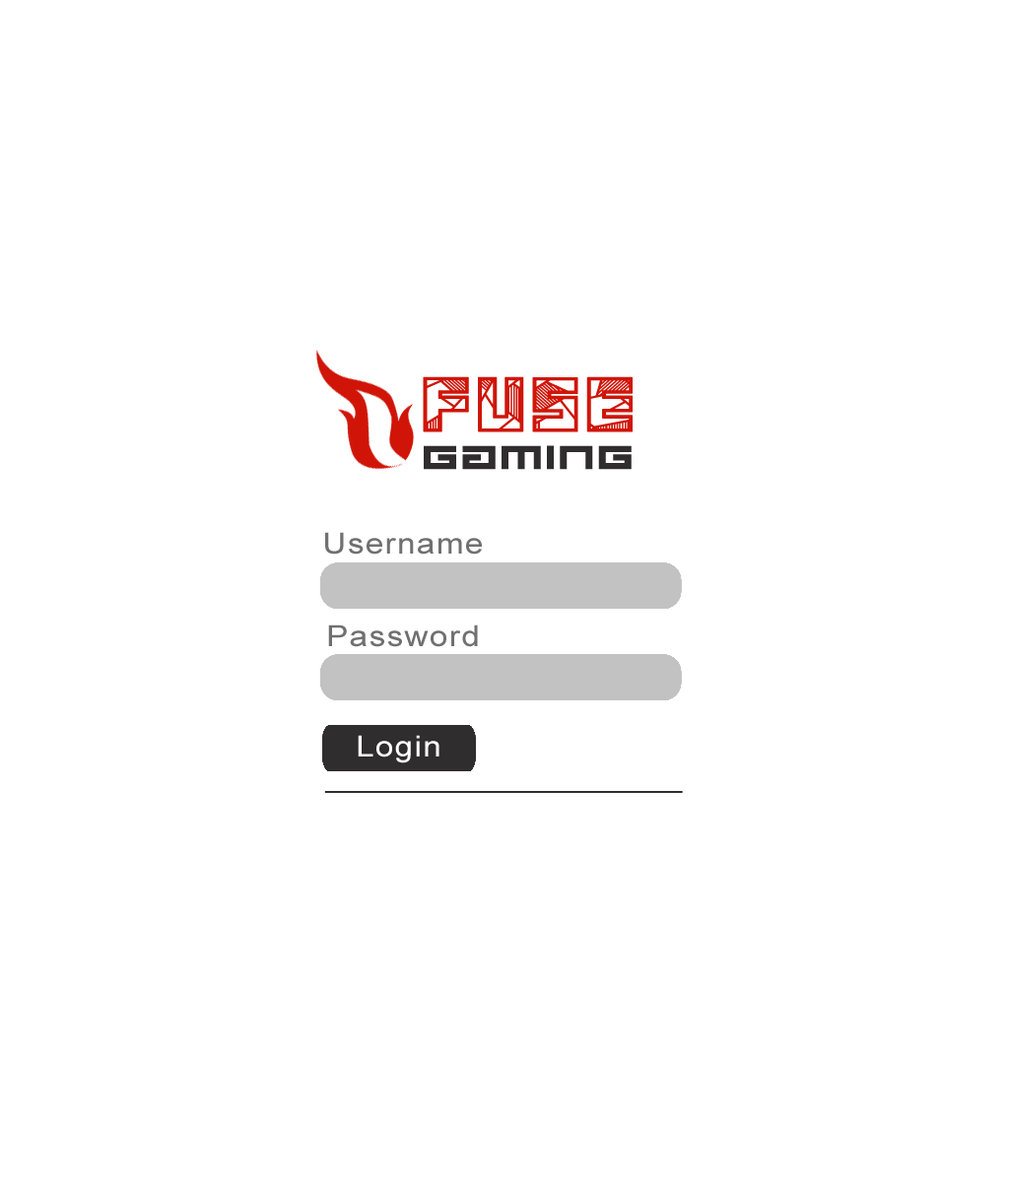
<style>
.page{position:relative;width:1009px;height:1182px;background:#ffffff}
.page>*{position:absolute;margin:0}
.t1{font:76.8px "Basscrw";letter-spacing:0.04em;color:#d01508;font-weight:bold;scale:1.12 1}
.t2{font:36.6px "Avenger";letter-spacing:0.04em;color:#2f2d2d;font-weight:bold;scale:1.12 1}
.t3{font:29.2px "ArialMT";letter-spacing:0.04em;color:#707070;scale:1.12 1}
.t4{font:29.2px "ArialMT";letter-spacing:0.04em;color:#ffffff;scale:1.12 1}
</style>
<div class="page">
<p class="t1" style="left:423px;top:376px;width:209px;height:56px">FUSE</p>
<p class="t2" style="left:424px;top:445px;width:207px;height:25px">GAMING</p>
<p class="t3" style="left:325px;top:532px;width:157px;height:23px">Username</p>
<p class="t3" style="left:328px;top:625px;width:150px;height:22px">Password</p>
<p class="t4" style="left:358px;top:735px;width:81px;height:28px">Login</p>
</div>
